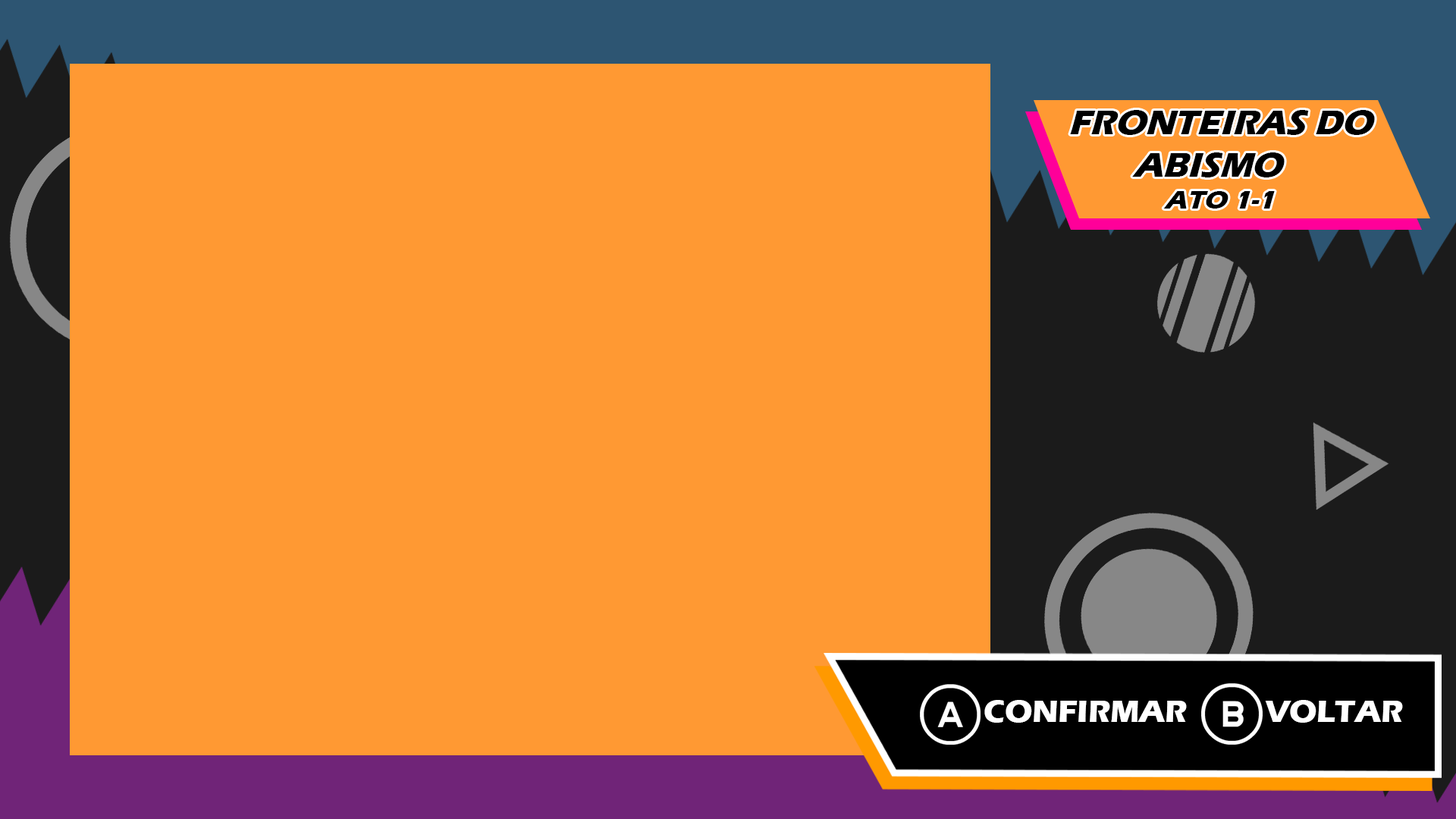
<style>
.page{position:relative;width:1456px;height:819px;background:#ff9933}
.page>*{position:absolute;margin:0}
.t1{font:36.3px "ErasITC-Bold";color:#000000}
.t2{font:27.2px "ErasITC-Bold";color:#000000}
.t3{font:31.6px "ErasITC-Bold";color:#ffffff}
</style>
<div class="page">
<p class="t1" style="left:1070px;top:110px;width:305px;height:99px;text-align:center">FRONTEIRAS DO ABISMO<br><span class="t2">  ATO 1-1</span></p>
<p class="t3" style="left:984px;top:700px;width:203px;height:23px">CONFIRMAR</p>
<p class="t3" style="left:1265px;top:700px;width:138px;height:23px">VOLTAR</p>
</div>
